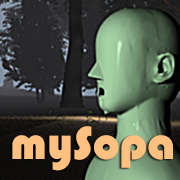
<style>
.page{position:relative;width:180px;height:180px}
.page>*{position:absolute;margin:0}
.t1{font:48px "Bauhaus93";color:#ffc080}
</style>
<div class="page">
<p class="t1" style="left:12px;top:126px;width:161px;height:45px">mySopa</p>
</div>
